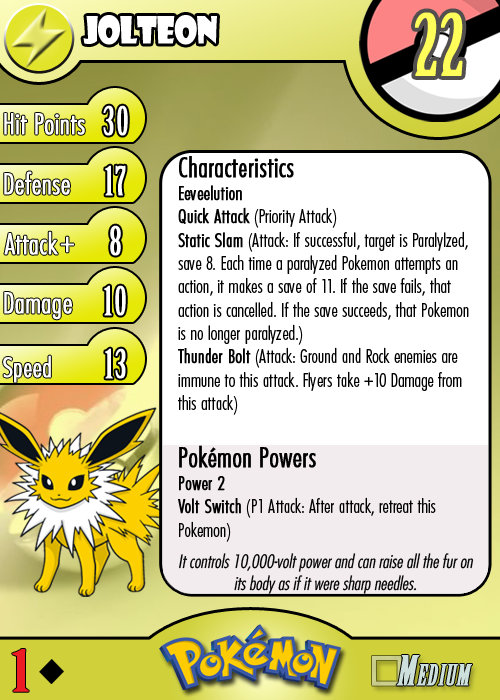
<style>
.page{position:relative;width:500px;height:700px;background:#ffffff}
.page>*{position:absolute;margin:0}
.t1{font:36.7px "ShowcardGothic-Reg";letter-spacing:-0.025em;color:#ffffff;scale:0.91 1}
.t2{font:83.3px "BirchStd";letter-spacing:0.025em;color:#fffd59;font-weight:bold}
.t3{font:27.8px "Futura-CondensedLight";color:#ffffff;font-weight:bold}
.t4{font:38.9px "BirchStd";letter-spacing:0.035em;color:#ffffff;font-weight:bold}
.t5{font:19.4px "FuturaCondensedBQ-Light";color:#010101}
.t6{font:27.8px "FuturaCondensedBQ-Light";color:#010101;font-weight:bold}
.t7{font:19.4px "FuturaCondensedBQ-Light";color:#010101;font-weight:bold}
.t8{font:30.6px "Futura-CondensedLight";color:#ffffff;font-weight:bold}
.t9{font:27.8px "FuturaCondensedBQ-Light";color:#ffffff;font-weight:bold}
.t10{font:18.1px "Futura-CondensedLight";color:#010101;font-style:italic}
.t11{font:55.6px "BirchStd";color:#ed1c24;font-weight:bold;scale:1.5 1}
</style>
<div class="page">
<p class="t1" style="left:83px;top:15px;width:134px;height:30px">jolteon</p>
<p class="t2" style="left:415px;top:12px;width:48px;height:64px">22</p>
<p class="t3" style="left:4px;top:113px;width:81px;height:22px">Hit Points</p>
<p class="t4" style="left:103px;top:105px;width:25px;height:31px">30</p>
<p class="t5" style="left:178px;top:156px;width:291px;height:386px"><span class="t6">Characteristics<br></span><span class="t7">Eeveelution<br>Quick Attack</span> (Priority Attack)<br><span class="t7">Static Slam</span> (Attack: If successful, target is Paralylzed, save 8. Each time a paralyzed Pokemon attempts an action, it makes a save of 11. If the save fails, that action is cancelled. If the save succeeds, that Pokemon is no longer paralyzed.)<br><span class="t7">Thunder Bolt</span> (Attack: Ground and Rock enemies are immune to this attack. Flyers take +10 Damage from this attack)<br><br><span class="t6">Pokémon Powers<br></span><span class="t7">Power 2<br>Volt Switch</span> (P1 Attack: After attack, retreat this Pokemon)</p>
<p class="t3" style="left:4px;top:171px;width:66px;height:24px">Defense</p>
<p class="t4" style="left:105px;top:165px;width:21px;height:31px">17</p>
<p class="t3" style="left:4px;top:231px;width:54px;height:24px">Attack</p>
<p class="t4" style="left:110px;top:225px;width:11px;height:31px">8</p>
<p class="t8" style="left:60px;top:236px;width:14px;height:17px">+</p>
<p class="t3" style="left:4px;top:292px;width:68px;height:28px">Damage</p>
<p class="t4" style="left:104px;top:285px;width:22px;height:31px">10</p>
<p class="t4" style="left:105px;top:348px;width:21px;height:31px">13</p>
<p class="t9" style="left:3px;top:355px;width:48px;height:28px">Speed</p>
<p class="t10" style="left:179px;top:553px;width:295px;height:41px;text-align:center">It controls 10,000-volt power and can raise all the fur on its body as if it were sharp needles.</p>
<p class="t11" style="left:12px;top:649px;width:17px;height:43px">1</p>
</div>
